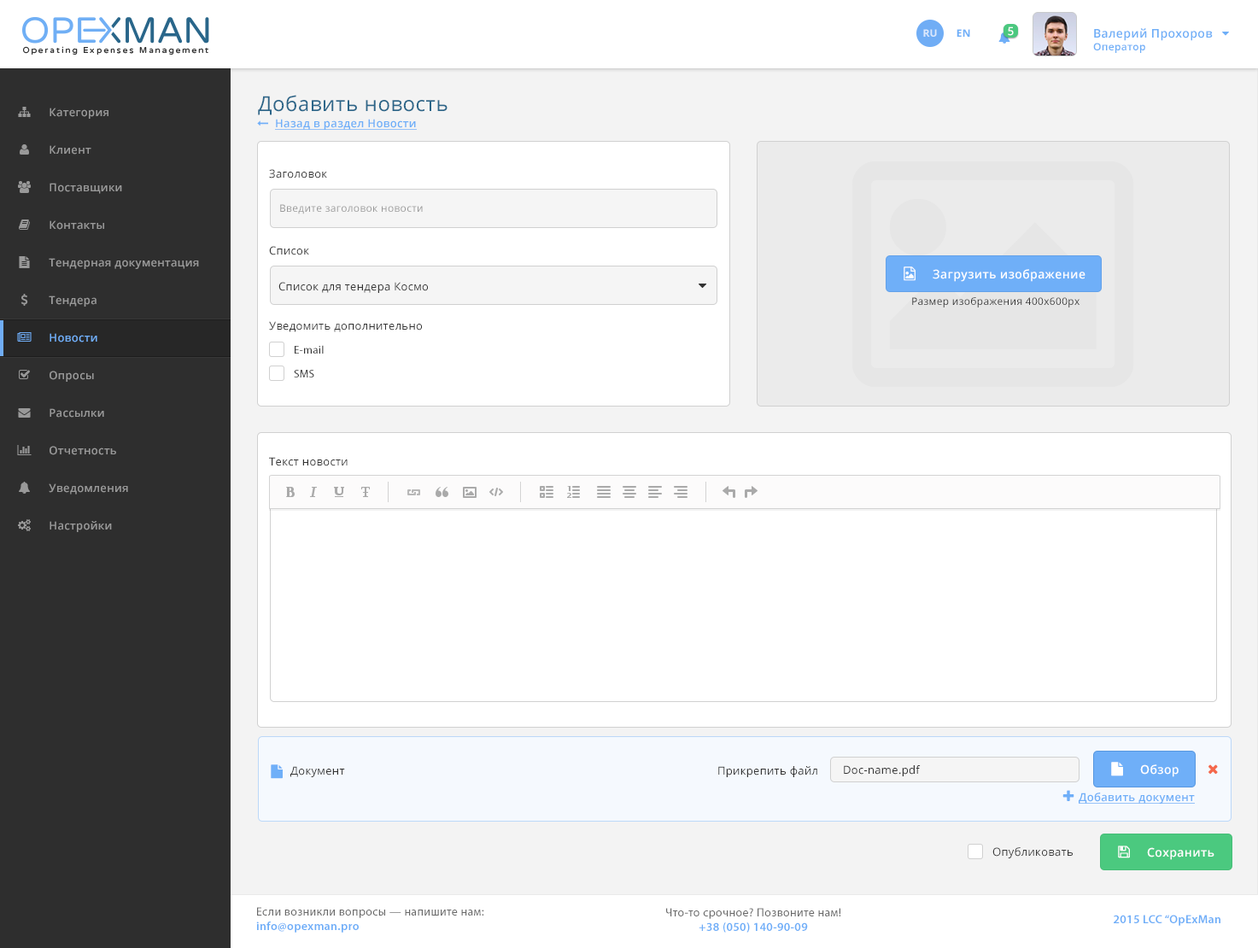
<style>
.page{position:relative;width:1258px;height:948px;background:#ffffff}
.page>*{position:absolute;margin:0}
.t1{font:10.2px "OpenSans-Bold";letter-spacing:0.025em;color:#dbe8fc;text-transform:uppercase}
.t2{font:10.2px "OpenSans-Bold";letter-spacing:0.025em;color:#6faff8;text-transform:uppercase}
.t3{font:11.1px "OpenSans-Semibold";letter-spacing:0.025em;color:#ffffff}
.t4{font:11.9px "OpenSans-Semibold";letter-spacing:0.025em;color:#6eaef7}
.t5{font:10.2px "OpenSans-Semibold";letter-spacing:0.025em;color:#6eaef7}
.t6{font:20.5px "OpenSans";letter-spacing:0.025em;color:#2c6689}
.t7{font:11.1px "OpenSans-Semibold";letter-spacing:0.025em;color:#999999}
.t8{font:11.1px "OpenSans-Semibold";letter-spacing:0.025em;color:#6faff8;text-decoration:underline}
.t9{font:11.1px "OpenSans";letter-spacing:0.025em;color:#333333}
.t10{font:10.2px "OpenSans";letter-spacing:0.025em;color:#999999}
.t11{font:12px "OpenSans-Semibold";letter-spacing:0.025em;color:#ffffff}
.t12{font:10.2px "OpenSans";letter-spacing:0.025em;color:#333333}
.t13{font:11.1px "OpenSans-Semibold";letter-spacing:0.025em;color:#70adf5}
.t14{font:11.1px "MyriadPro-Regular";letter-spacing:0.025em;color:#333333}
.t15{font:11.1px "OpenSans";letter-spacing:0.025em;color:#3a3a3a}
.t16{font:11.9px "MyriadPro-Regular";letter-spacing:0.025em;color:#696969}
.t17{font:11.9px "MyriadPro-Semibold";letter-spacing:0.025em;color:#6eaef8}
</style>
<div class="page">
<p class="t1" style="left:923px;top:29px;width:14px;height:8px">Ru</p>
<p class="t2" style="left:956px;top:29px;width:14px;height:8px">EN</p>
<p class="t3" style="left:1008px;top:26px;width:6px;height:10px">5</p>
<p class="t4" style="left:1093px;top:28px;width:120px;height:25px">Валерий Прохоров<br><span class="t5">Оператор</span></p>
<p class="t6" style="left:258px;top:95px;width:189px;height:20px">Добавить новость</p>
<p class="t7" style="left:50px;top:108px;width:58px;height:11px">Категория</p>
<p class="t8" style="left:275px;top:119px;width:142px;height:11px">Назад в раздел Новости</p>
<p class="t7" style="left:50px;top:145px;width:41px;height:10px">Клиент</p>
<p class="t9" style="left:269px;top:169px;width:58px;height:9px">Заголовок</p>
<p class="t7" style="left:50px;top:183px;width:72px;height:11px">Поставщики</p>
<p class="t10" style="left:280px;top:204px;width:143px;height:10px">Введите заголовок новости</p>
<p class="t7" style="left:50px;top:220px;width:54px;height:10px">Контакты</p>
<p class="t9" style="left:269px;top:246px;width:40px;height:9px">Список</p>
<p class="t7" style="left:49px;top:258px;width:150px;height:11px">Тендерная документация</p>
<p class="t11" style="left:933px;top:269px;width:152px;height:13px">Загрузить изображение</p>
<p class="t9" style="left:278px;top:282px;width:150px;height:11px">Список для тендера Космо</p>
<p class="t7" style="left:49px;top:295px;width:48px;height:12px">Тендера</p>
<p class="t12" style="left:912px;top:297px;width:167px;height:10px">Размер изображения 400х600рх</p>
<p class="t9" style="left:269px;top:321px;width:153px;height:11px">Уведомить дополнительно</p>
<p class="t13" style="left:50px;top:333px;width:47px;height:9px">Новости</p>
<p class="t14" style="left:295px;top:345px;width:29px;height:9px">E-mail</p>
<p class="t7" style="left:50px;top:371px;width:44px;height:11px">Опросы</p>
<p class="t14" style="left:294px;top:370px;width:20px;height:7px">SMS</p>
<p class="t7" style="left:50px;top:408px;width:54px;height:10px">Рассылки</p>
<p class="t7" style="left:50px;top:446px;width:66px;height:9px">Отчетность</p>
<p class="t9" style="left:269px;top:457px;width:79px;height:9px">Текст новости</p>
<p class="t7" style="left:49px;top:483px;width:79px;height:11px">Уведомления</p>
<p class="t7" style="left:50px;top:521px;width:62px;height:11px">Настройки</p>
<p class="t9" style="left:290px;top:766px;width:55px;height:11px">Документ</p>
<p class="t9" style="left:718px;top:766px;width:99px;height:11px">Прикрепить файл</p>
<p class="t9" style="left:844px;top:765px;width:77px;height:11px">Doc-name.pdf</p>
<p class="t11" style="left:1140px;top:764px;width:39px;height:13px">Обзор</p>
<p class="t8" style="left:1079px;top:793px;width:116px;height:11px">Добавить документ</p>
<p class="t15" style="left:992px;top:847px;width:81px;height:11px">Опубликовать</p>
<p class="t11" style="left:1147px;top:847px;width:67px;height:13px">Сохранить</p>
<p class="t16" style="left:256px;top:907px;width:228px;height:26px">Если возникли вопросы — напишите нам:<br><span class="t17">info@opexman.pro</span></p>
<p class="t16" style="left:666px;top:908px;width:175px;height:25px;text-align:center">Что-то срочное? Позвоните нам!<br><span class="t17">+38 (050) 140-90-09</span></p>
<p class="t17" style="left:1114px;top:915px;width:106px;height:11px">2015 LCC “OpExMan</p>
</div>
